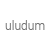
<style>
.page{position:relative;width:50px;height:50px;background:#ffffff}
.page>*{position:absolute;margin:0}
.t1{font:12px "Roboto-Light";color:#777777}
</style>
<div class="page">
<p class="t1" style="left:5px;top:20px;width:40px;height:10px">uludum</p>
</div>
